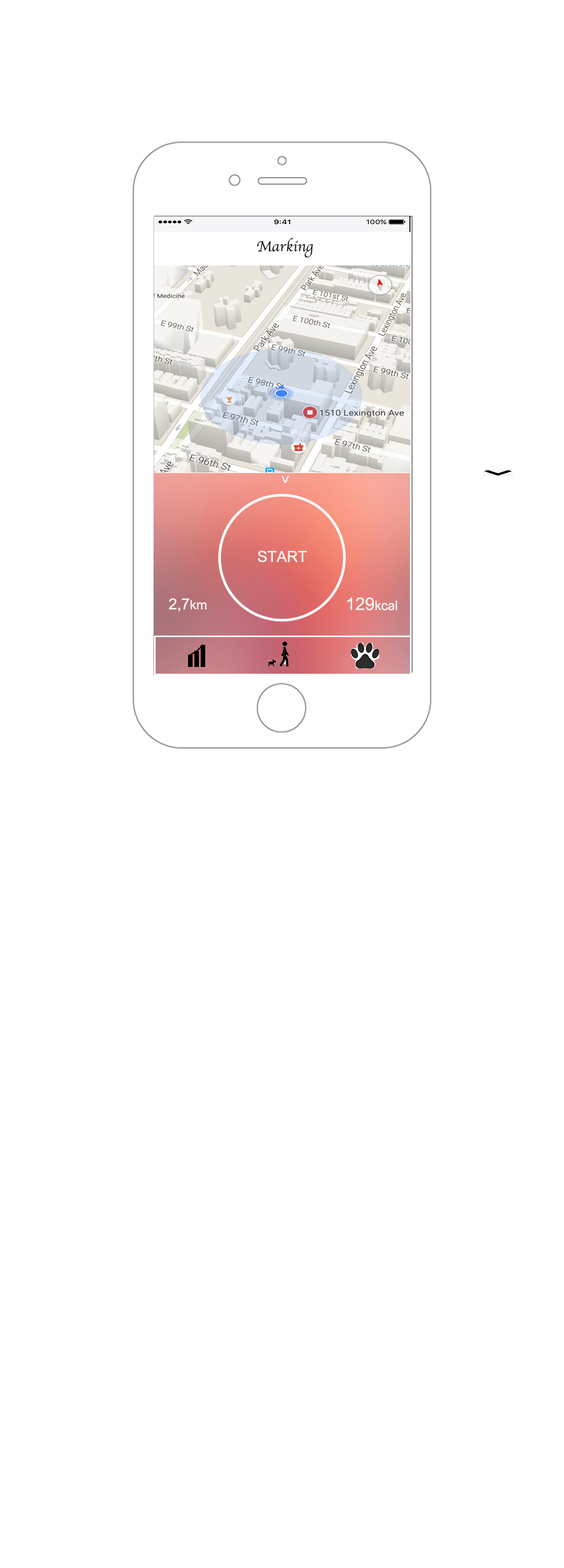
<style>
.page{position:relative;width:564px;height:1568px;background:#ffffff}
.page>*{position:absolute;margin:0}
.t1{font:15.2px "Apple-Chancery";color:#1e1d1c}
.t2{font:15.2px "ArialMT";color:#faf6f4}
.t3{font:13.1px "ArialMT";color:#faf6f4}
.t4{font:17.4px "ArialMT";color:#faf6f4}
</style>
<div class="page">
<p class="t1" style="left:257px;top:238px;width:57px;height:20px">Marking</p>
<p class="t2" style="left:282px;top:476px;width:8px;height:7px;rotate:90deg">&gt;</p>
<p class="t2" style="left:258px;top:550px;width:49px;height:12px">START</p>
<p class="t2" style="left:169px;top:598px;width:38px;height:14px">2,7<span class="t3">km</span></p>
<p class="t3" style="left:348px;top:597px;width:50px;height:13px"><span class="t4">129</span>kcal</p>
</div>
